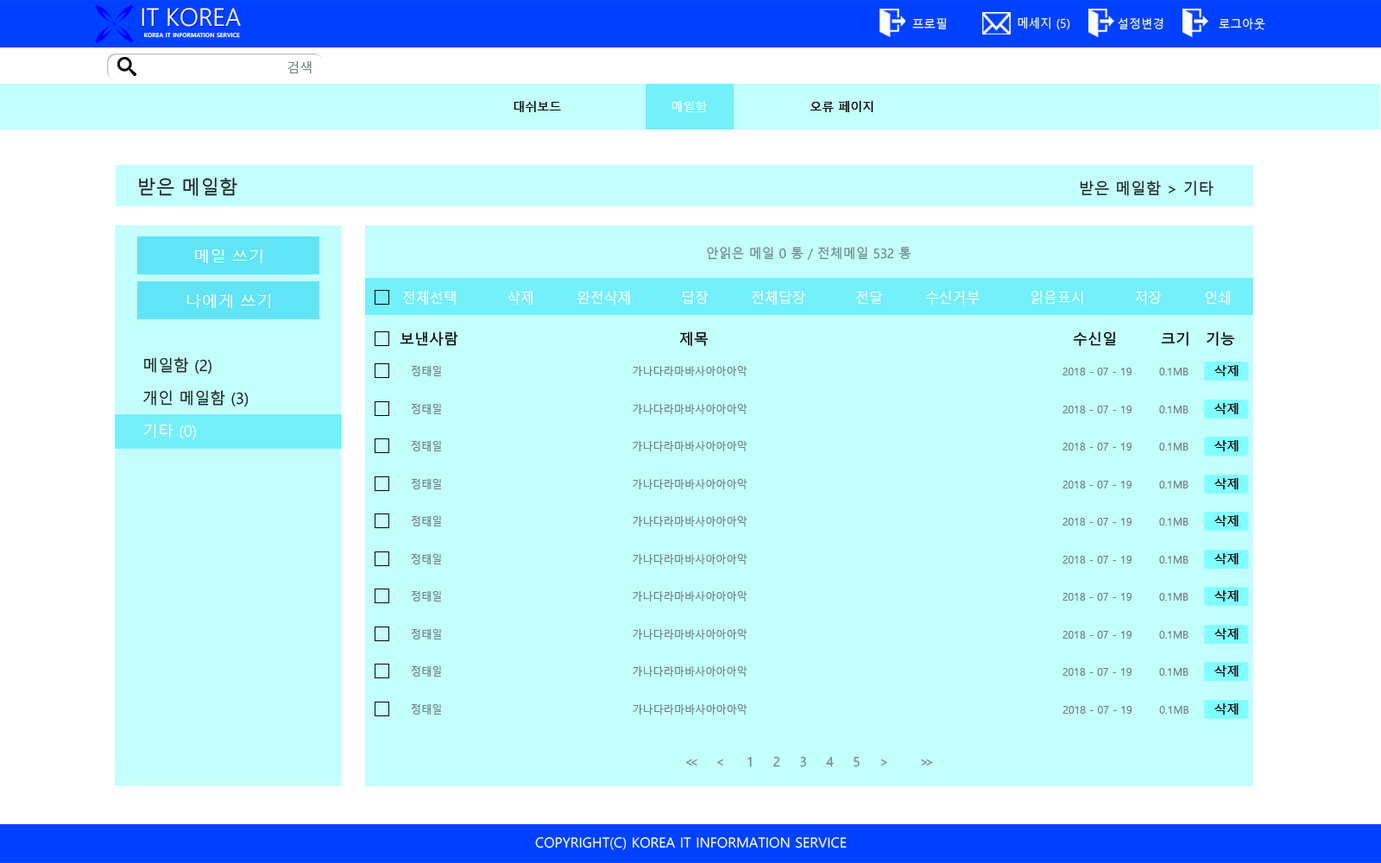
<style>
.page{position:relative;width:1381px;height:863px;background:#c3fffd}
.page>*{position:absolute;margin:0}
.t1{font:12.1px "MalgunGothic";color:#ffffff}
.t2{font:12.9px "MalgunGothic";color:#6e8282}
.t3{font:12.1px "MalgunGothic";color:#060808}
.t4{font:19px "MalgunGothic";color:#1b2122}
.t5{font:15.5px "MalgunGothic";color:#1b2122}
.t6{font:14.7px "MalgunGothic";color:#ffffff;scale:1.11 1}
.t7{font:12.9px "MalgunGothic";color:#6d8181}
.t8{font:14.7px "MalgunGothic";color:#ffffff;scale:0.93 1}
.t9{font:14.6px "MalgunGothic";color:#060808}
.t10{font:15.5px/32.5px "MalgunGothic";color:#202728}
.t11{font:15.5px/32.5px "MalgunGothic";color:#ffffff}
.t12{font:12.5px "MalgunGothic";color:#060808}
.t13{font:11.2px "MalgunGothic";color:#6d8181;scale:0.93 1}
.t14{font:13px "MalgunGothic";letter-spacing:-0.9em;color:#6d8181}
.t15{font:13px "MalgunGothic";letter-spacing:-0.3em;color:#6d8181}
.t16{font:13px "MalgunGothic";color:#6d8181}
.t17{font:13.8px "MalgunGothic";color:#ffffff}
</style>
<div class="page">
<p class="t1" style="left:912px;top:17px;width:35px;height:12px">프로필</p>
<p class="t1" style="left:1018px;top:16px;width:52px;height:14px">메세지 (5)</p>
<p class="t1" style="left:1118px;top:17px;width:46px;height:12px">설정변경</p>
<p class="t1" style="left:1219px;top:17px;width:47px;height:13px">로그아웃</p>
<p class="t2" style="left:287px;top:61px;width:25px;height:12px">검색</p>
<p class="t3" style="left:514px;top:101px;width:47px;height:11px">대쉬보드</p>
<p class="t1" style="left:672px;top:101px;width:35px;height:11px">메일함</p>
<p class="t3" style="left:811px;top:101px;width:63px;height:11px">오류 페이지</p>
<p class="t4" style="left:139px;top:178px;width:98px;height:19px">받은 메일함</p>
<p class="t5" style="left:1080px;top:180px;width:134px;height:16px">받은 메일함 &gt; 기타</p>
<p class="t6" style="left:195px;top:249px;width:67px;height:14px">메일 쓰기</p>
<p class="t7" style="left:707px;top:247px;width:205px;height:13px">안읽은 메일 0 통 / 전체메일 532 통</p>
<p class="t8" style="left:403px;top:291px;width:827px;height:14px">전체선택  삭제  완전삭제  답장  전체답장  전달  수신거부  읽음표시  저장  인쇄</p>
<p class="t6" style="left:186px;top:294px;width:84px;height:14px">나에게 쓰기</p>
<p class="t9" style="left:400px;top:332px;width:835px;height:14px">보낸사람             제목                수신일    크기   기능</p>
<p class="t10" style="left:143px;top:357px;width:106px;height:83px">메일함 (2)<br>개인 메일함 (3)<br><span class="t11">기타 (0)</span></p>
<p class="t12" style="left:1215px;top:365px;width:24px;height:11px">삭제</p>
<p class="t13" style="left:411px;top:366px;width:778px;height:10px">정태일                         가나다라마바사아아아악                 2018 - 07 - 19   0.1MB</p>
<p class="t13" style="left:411px;top:404px;width:778px;height:10px">정태일                         가나다라마바사아아아악                 2018 - 07 - 19   0.1MB</p>
<p class="t12" style="left:1215px;top:403px;width:24px;height:11px">삭제</p>
<p class="t13" style="left:411px;top:441px;width:778px;height:11px">정태일                         가나다라마바사아아아악                 2018 - 07 - 19   0.1MB</p>
<p class="t12" style="left:1215px;top:440px;width:24px;height:12px">삭제</p>
<p class="t13" style="left:411px;top:479px;width:778px;height:10px">정태일                         가나다라마바사아아아악                 2018 - 07 - 19   0.1MB</p>
<p class="t12" style="left:1215px;top:478px;width:24px;height:11px">삭제</p>
<p class="t13" style="left:411px;top:516px;width:778px;height:11px">정태일                         가나다라마바사아아아악                 2018 - 07 - 19   0.1MB</p>
<p class="t12" style="left:1215px;top:515px;width:24px;height:12px">삭제</p>
<p class="t13" style="left:411px;top:554px;width:778px;height:11px">정태일                         가나다라마바사아아아악                 2018 - 07 - 19   0.1MB</p>
<p class="t12" style="left:1215px;top:553px;width:24px;height:12px">삭제</p>
<p class="t13" style="left:411px;top:591px;width:778px;height:11px">정태일                         가나다라마바사아아아악                 2018 - 07 - 19   0.1MB</p>
<p class="t12" style="left:1215px;top:590px;width:24px;height:12px">삭제</p>
<p class="t13" style="left:411px;top:629px;width:778px;height:11px">정태일                         가나다라마바사아아아악                 2018 - 07 - 19   0.1MB</p>
<p class="t12" style="left:1215px;top:628px;width:24px;height:12px">삭제</p>
<p class="t12" style="left:1215px;top:666px;width:24px;height:11px">삭제</p>
<p class="t13" style="left:411px;top:666px;width:778px;height:11px">정태일                         가나다라마바사아아아악                 2018 - 07 - 19   0.1MB</p>
<p class="t13" style="left:411px;top:704px;width:778px;height:11px">정태일                         가나다라마바사아아아악                 2018 - 07 - 19   0.1MB</p>
<p class="t12" style="left:1215px;top:704px;width:24px;height:11px">삭제</p>
<p class="t14" style="left:685px;top:756px;width:248px;height:11px"><span class="t15">&lt;&lt;</span><span class="t16">  &lt; </span>1 2 3 4 5 <span class="t16">&gt; </span><span class="t15">&gt;&gt;</span></p>
<p class="t17" style="left:535px;top:837px;width:312px;height:13px">COPYRIGHT(C) KOREA IT INFORMATION SERVICE</p>
</div>
